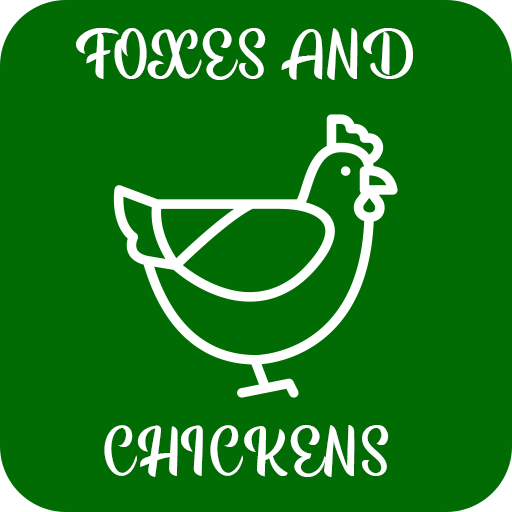
<style>
.page{position:relative;width:512px;height:512px;background:#006c03}
.page>*{position:absolute;margin:0}
.t1{font:56.8px "BeautyMountainsPersonalUse";color:#ffffff}
</style>
<div class="page">
<p class="t1" style="left:76px;top:28px;width:337px;height:52px">FOXES AND</p>
<p class="t1" style="left:104px;top:425px;width:285px;height:52px">CHICKENS</p>
</div>
